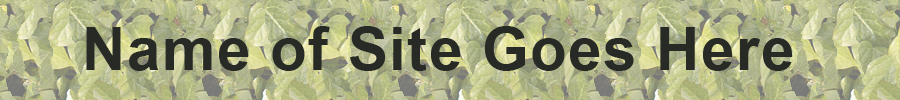
<style>
.page{position:relative;width:900px;height:100px}
.page>*{position:absolute;margin:0}
.t1{font:60px "Arial-BoldMT";letter-spacing:0.025em;color:#272a25}
</style>
<div class="page">
<p class="t1" style="left:86px;top:26px;width:707px;height:45px">Name of Site Goes Here</p>
</div>
